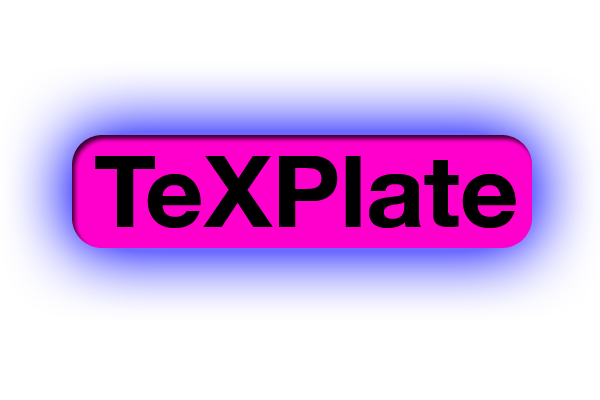
<style>
.page{position:relative;width:600px;height:400px;background:#ffffff}
.page>*{position:absolute;margin:0}
.t1{font:100px "HelveticaNeue-Bold";color:#000000}
</style>
<div class="page">
<p class="t1" style="left:95px;top:156px;width:421px;height:72px">TeXPlate</p>
</div>
